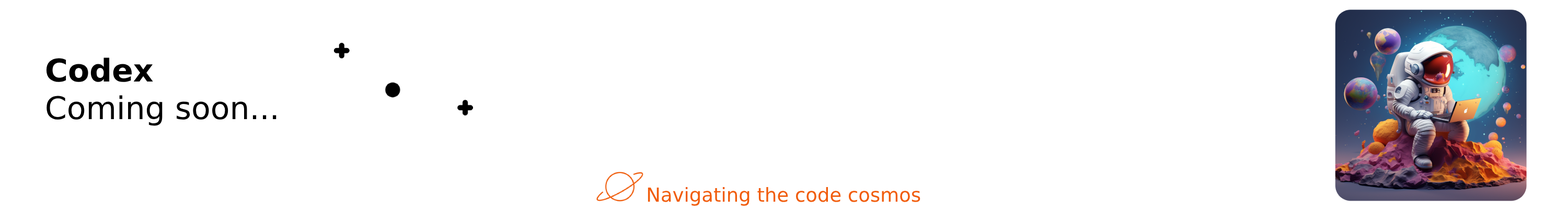
<style>
.page{position:relative;width:1568px;height:209px;background:#ffffff}
.page>*{position:absolute;margin:0}
.t1{font:31.4px "DejaVuSans";color:#000000}
.t2{font:31.4px "DejaVuSans-Bold";color:#000000}
.t3{font:19.3px "DejaVuSans";color:#f15c0b}
</style>
<div class="page">
<p class="t1" style="left:46px;top:57px;width:230px;height:69px"><span class="t2">Codex </span><br>Coming soon...</p>
<p class="t3" style="left:648px;top:187px;width:272px;height:19px">Navigating the code cosmos</p>
</div>
